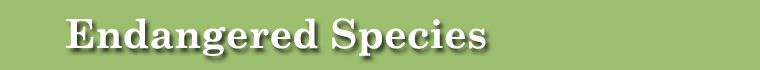
<style>
.page{position:relative;width:760px;height:70px;background:#9dbe6f}
.page>*{position:absolute;margin:0}
.t1{font:40px "CenturySchoolbook-Bold";color:#ffffff}
</style>
<div class="page">
<p class="t1" style="left:66px;top:18px;width:420px;height:38px">Endangered Species</p>
</div>
